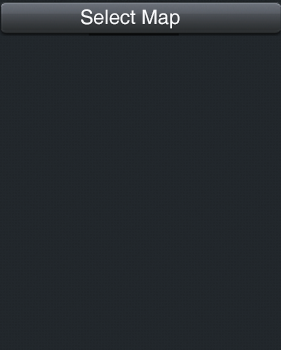
<style>
.page{position:relative;width:281px;height:350px}
.page>*{position:absolute;margin:0}
.t1{font:20px "Helvetica";color:#f9fafc}
</style>
<div class="page">
<p class="t1" style="left:81px;top:9px;width:99px;height:20px">Select Map</p>
</div>
